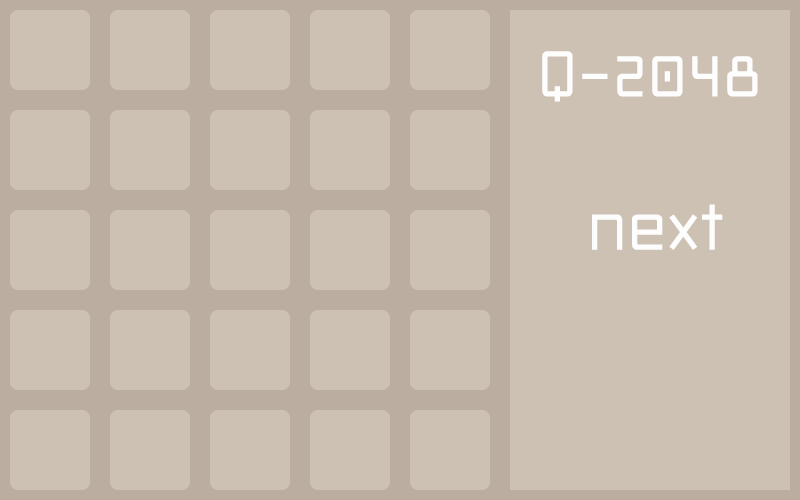
<style>
.page{position:relative;width:800px;height:500px;background:#cdc1b4}
.page>*{position:absolute;margin:0}
.t1{font:100px "2006iannnnnISO";color:#fefdfd}
</style>
<div class="page">
<p class="t1" style="left:542px;top:51px;width:216px;height:51px">Q-2048</p>
<p class="t1" style="left:592px;top:204px;width:131px;height:46px">next</p>
</div>
